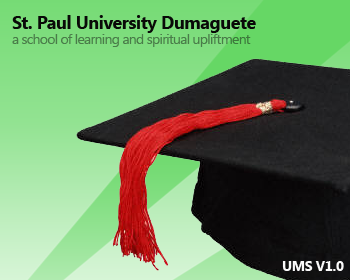
<style>
.page{position:relative;width:350px;height:280px}
.page>*{position:absolute;margin:0}
.t1{font:18px "SegoeUI-Bold";letter-spacing:-0.025em;color:#090908}
.t2{font:14px "SegoeUI";letter-spacing:-0.05em;color:#4a7c49}
.t3{font:14px "SegoeUI-Bold";letter-spacing:-0.025em;color:#fafafa}
</style>
<div class="page">
<p class="t1" style="left:12px;top:15px;width:244px;height:18px">St. Paul University Dumaguete</p>
<p class="t2" style="left:12px;top:34px;width:239px;height:13px">a school of learning and spiritual upliftment</p>
<p class="t3" style="left:282px;top:261px;width:62px;height:10px">UMS V1.0</p>
</div>
